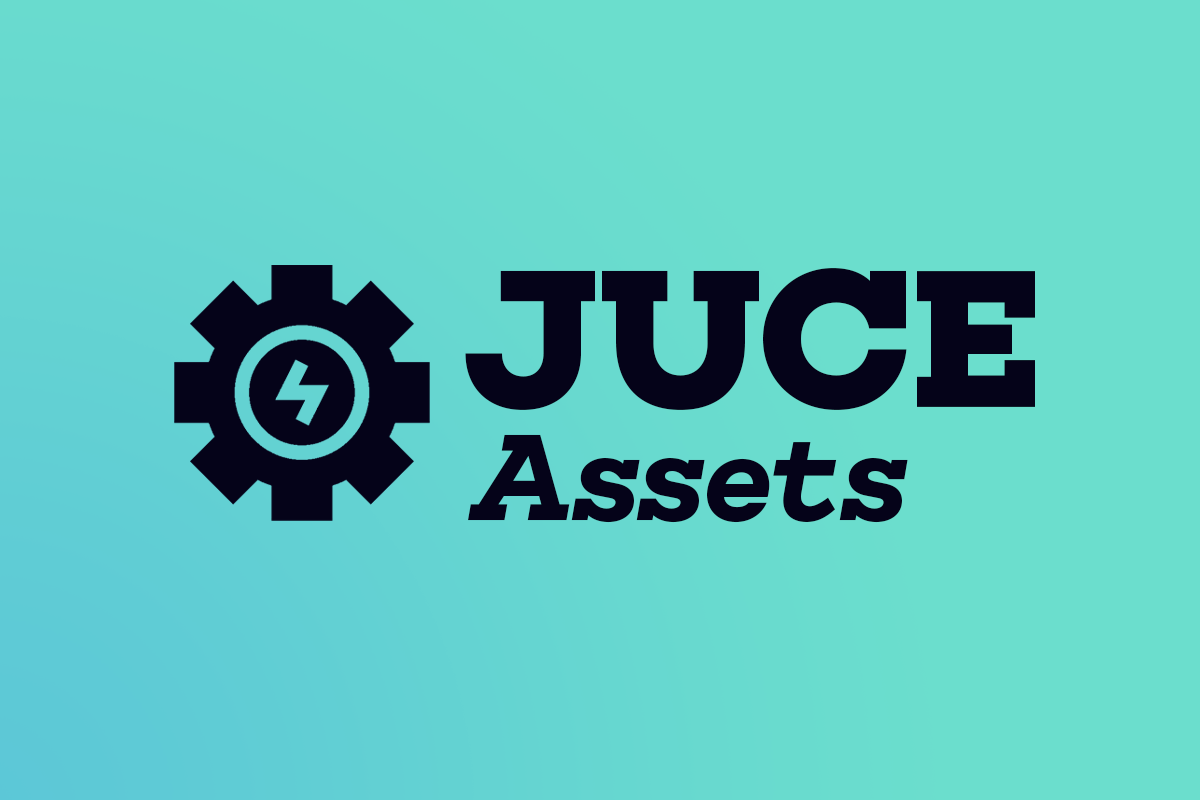
<style>
.page{position:relative;width:1200px;height:800px;background:#6bdecd}
.page>*{position:absolute;margin:0}
.t1{font:200px "Choplin-Bold";color:#050319}
.t2{font:125px "Choplin-SemiBoldItalic";color:#050319}
</style>
<div class="page">
<p class="t1" style="left:465px;top:268px;width:570px;height:142px">JUCE</p>
<p class="t2" style="left:468px;top:434px;width:440px;height:89px">Assets</p>
</div>
